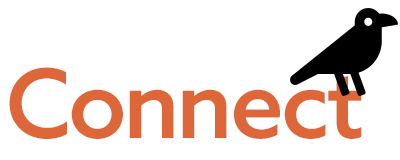
<style>
.page{position:relative;width:400px;height:160px;background:#ffffff}
.page>*{position:absolute;margin:0}
.t1{font:96px "AzoSans-Medium";letter-spacing:-0.025em;color:#de6739}
</style>
<div class="page">
<p class="t1" style="left:9px;top:67px;width:353px;height:72px">Connect</p>
</div>
